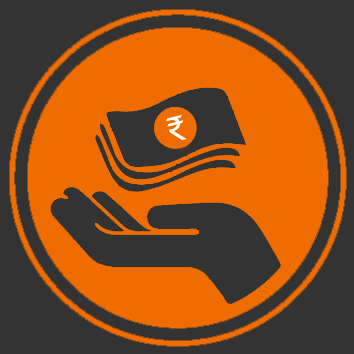
<style>
.page{position:relative;width:354px;height:354px;background:#333333}
.page>*{position:absolute;margin:0}
.t1{font:34.2px "ArialMT";color:#ffffff}
</style>
<div class="page">
<p class="t1" style="left:166px;top:114px;width:21px;height:26px;rotate:-14deg">₹</p>
</div>
